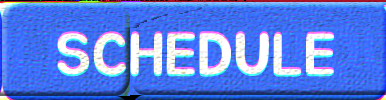
<style>
.page{position:relative;width:386px;height:100px}
.page>*{position:absolute;margin:0}
.t1{font:59.7px "BMJUA"}
</style>
<div class="page">
<p class="t1" style="left:55px;top:31px;width:277px;height:44px">SCHEDULE</p>
</div>
